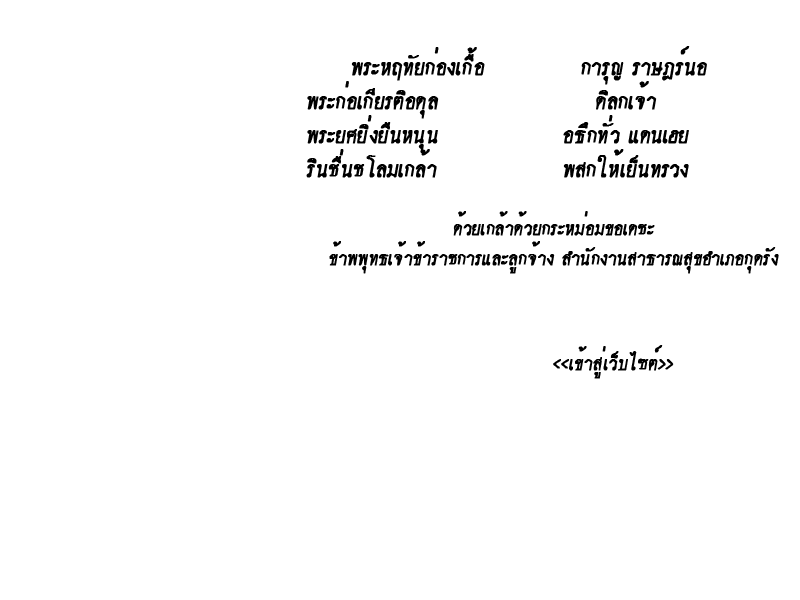
<style>
.page{position:relative;width:800px;height:600px;background:#ffffff}
.page>*{position:absolute;margin:0}
.t1{font:28.4px "PSPimpdeed";color:#000000;font-variant:small-caps;font-weight:bold;font-style:italic}
.t2{font:24.4px "PSPimpdeed";color:#000000;font-variant:small-caps;font-weight:bold;font-style:italic}
</style>
<div class="page">
<p class="t1" style="left:306px;top:46px;width:473px;height:228px;text-align:center">พระหฤทัยก่องเกื้อ การุญ ราษฎร์นอ<br>พระก่อเกียรติอดุล ดิลกเจ้า<br>พระยศยิ่งยืนหนุน อธึกทั่ว แดนเฮย<br>รินชื่นชโลมเกล้า พสกให้เย็นทรวง<br><span class="t2"><br>ด้วยเกล้าด้วยกระหม่อมขอเดชะ<br>ข้าพพุทธเจ้าข้าราชการและลูกจ้าง สำนักงานสาธารณสุขอำเภอกุดรัง</span></p>
<p class="t2" style="left:553px;top:345px;width:121px;height:34px">&lt;&lt;เข้าสู่เว็บไซต์&gt;&gt;</p>
</div>
